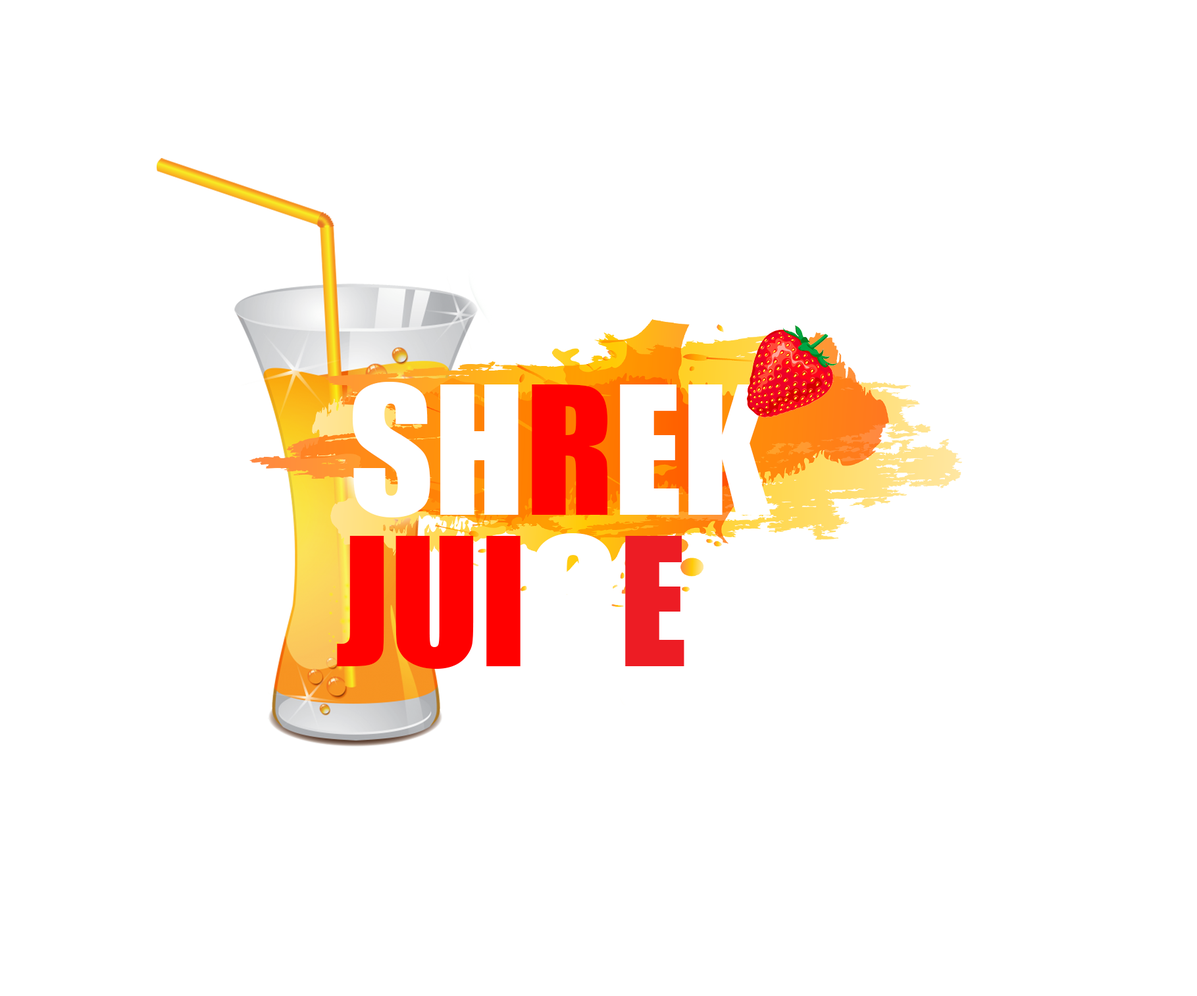
<style>
.page{position:relative;width:1197px;height:996px;background:#ffffff}
.page>*{position:absolute;margin:0}
.t1{font:164.6px "Impact";color:#ffffff}
.t2{font:164.6px "Impact";color:#ff0000}
.t3{font:164.6px "Impact";color:#ed1c24}
</style>
<div class="page">
<p class="t1" style="left:352px;top:382px;width:419px;height:135px">SH<span class="t2">R</span>EK</p>
<p class="t2" style="left:337px;top:533px;width:348px;height:136px">JUI<span class="t1">C</span><span class="t3">E</span></p>
</div>
